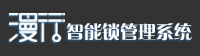
<style>
.page{position:relative;width:200px;height:56px;background:#333333}
.page>*{position:absolute;margin:0}
.t1{font:18px "FZCQJW--GB1-0";color:#ffffff}
</style>
<div class="page">
<p class="t1" style="left:67px;top:23px;width:125px;height:18px">智能锁管理系统</p>
</div>
